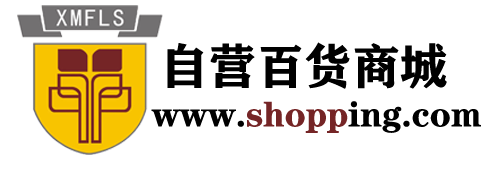
<style>
.page{position:relative;width:484px;height:169px;background:#ffffff}
.page>*{position:absolute;margin:0}
.t1{font:48px "FZCHSJW--GB1-0";color:#000000}
.t2{font:36px "FZCHSJW--GB1-0";color:#000000}
.t3{font:36px "FZCHSJW--GB1-0";color:#752526}
</style>
<div class="page">
<p class="t1" style="left:167px;top:42px;width:280px;height:47px">自营百货商城</p>
<p class="t2" style="left:151px;top:101px;width:330px;height:32px">www.<span class="t3">shopp</span>ing.com</p>
</div>
